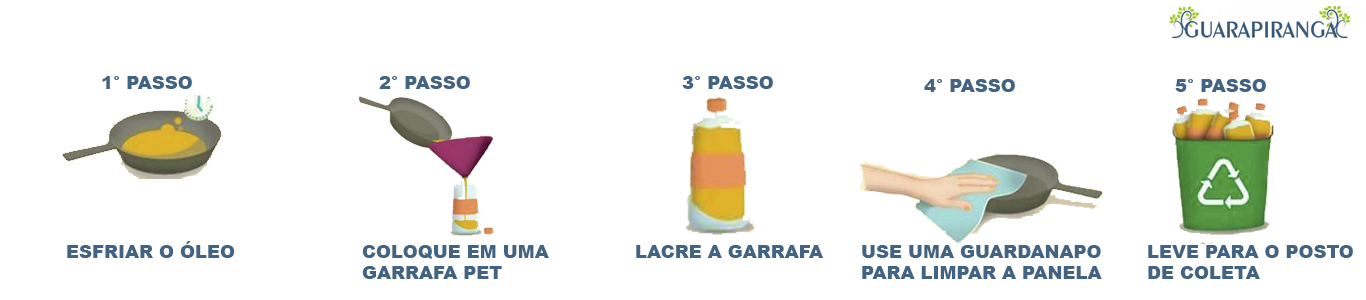
<style>
.page{position:relative;width:1366px;height:300px;background:#ffffff}
.page>*{position:absolute;margin:0}
.t1{font:18px "Arial-Black";color:#426382}
</style>
<div class="page">
<p class="t1" style="left:102px;top:76px;width:90px;height:13px">1° PASSO</p>
<p class="t1" style="left:379px;top:76px;width:91px;height:13px">2° PASSO</p>
<p class="t1" style="left:682px;top:76px;width:91px;height:13px">3° PASSO</p>
<p class="t1" style="left:924px;top:79px;width:91px;height:13px">4° PASSO</p>
<p class="t1" style="left:1175px;top:79px;width:91px;height:13px">5° PASSO</p>
<p class="t1" style="left:67px;top:241px;width:168px;height:17px">ESFRIAR O ÓLEO</p>
<p class="t1" style="left:362px;top:245px;width:187px;height:34px">COLOQUE EM UMA <br>GARRAFA PET</p>
<p class="t1" style="left:636px;top:245px;width:188px;height:13px">LACRE A GARRAFA</p>
<p class="t1" style="left:862px;top:245px;width:240px;height:34px">USE UMA GUARDANAPO PARA LIMPAR A PANELA</p>
<p class="t1" style="left:1148px;top:245px;width:205px;height:34px">LEVE PARA O POSTO<br>DE COLETA</p>
</div>
